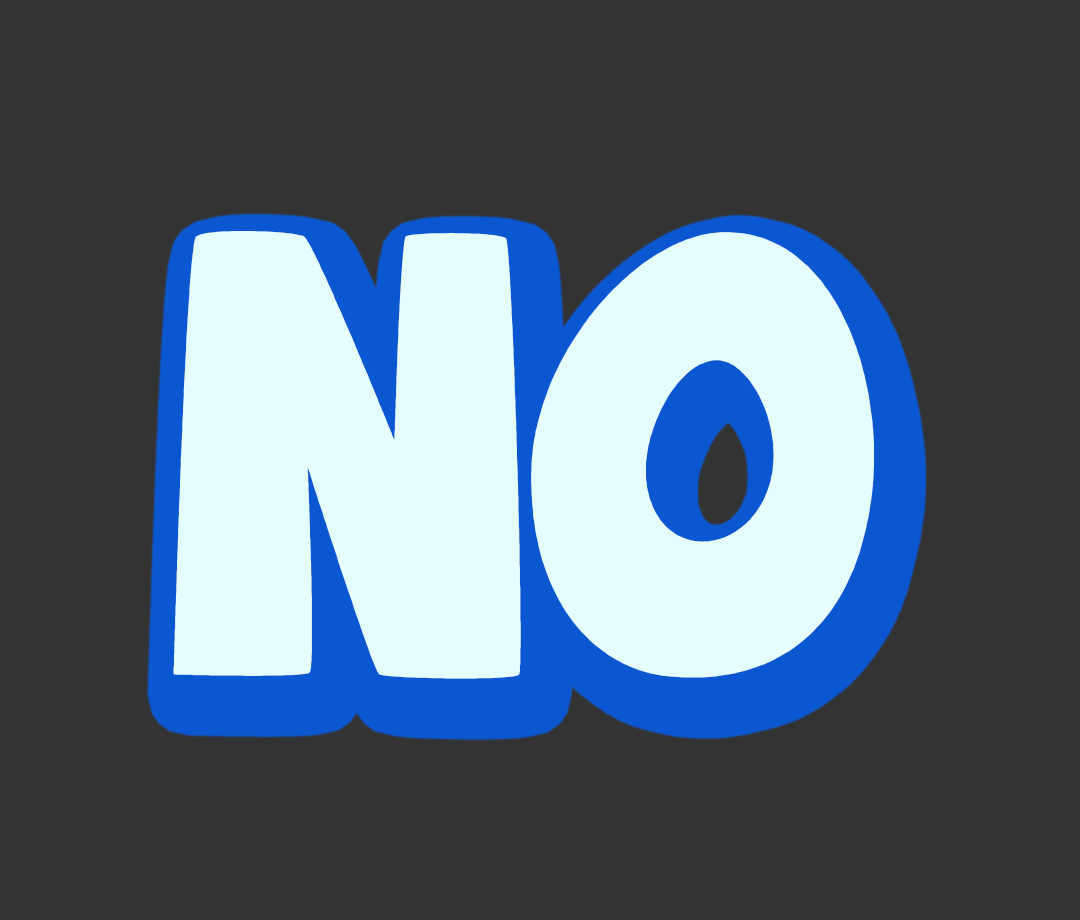
<style>
.page{position:relative;width:1080px;height:920px;background:#333333}
.page>*{position:absolute;margin:0}
.t1{font:377.6px "Big_Bottom_Cartoon";letter-spacing:-0.005em;color:#e4fdfd}
</style>
<div class="page">
<p class="t1" style="left:173px;top:231px;width:701px;height:448px">NO</p>
</div>
